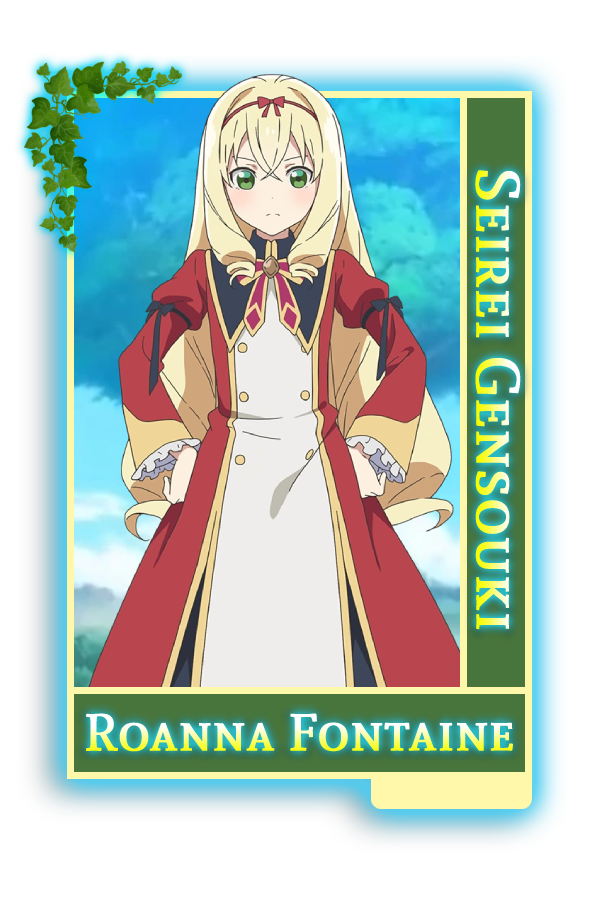
<style>
.page{position:relative;width:600px;height:900px}
.page>*{position:absolute;margin:0}
.t1{font:61px "AndadaSC-Regular";font-weight:bold}
.t2{font:52px "AndadaSC-Regular";font-weight:bold}
</style>
<div class="page">
<p class="t1" style="left:475px;top:170px;width:46px;height:460px;rotate:90deg">Seirei Gensouki</p>
<p class="t2" style="left:85px;top:713px;width:429px;height:39px">Roanna Fontaine</p>
</div>
